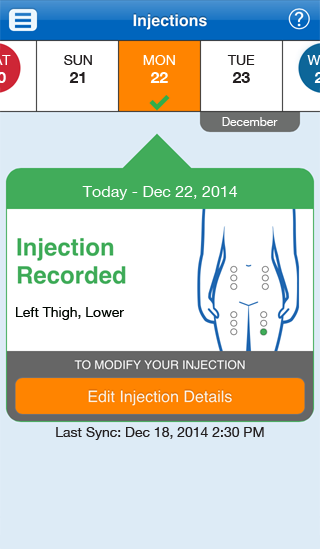
<style>
.page{position:relative;width:320px;height:549px;background:#ddebf6}
.page>*{position:absolute;margin:0}
.t1{font:14px/18px "HelveticaNeue";color:#231f20}
.t2{font:16px/18px "HelveticaNeue-Bold";color:#231f20}
.t3{font:14px/18px "HelveticaNeue";color:#ffffff}
.t4{font:16px/18px "HelveticaNeue-Bold";color:#ffffff}
.t5{font:12px "HelveticaNeue";color:#ffffff}
.t6{font:16px "HelveticaNeue";color:#ffffff}
.t7{font:14px "HelveticaNeue";color:#000600}
.t8{font:14px "HelveticaNeue";color:#231f20}
</style>
<div class="page">
<p class="t1" style="left:64px;top:55px;width:28px;height:28px;text-align:center">SUN<br><span class="t2">21</span></p>
<p class="t3" style="left:143px;top:55px;width:32px;height:28px;text-align:center">MON<br><span class="t4">22</span></p>
<p class="t1" style="left:227px;top:55px;width:28px;height:28px;text-align:center">TUE<br><span class="t2">23</span></p>
<p class="t5" style="left:222px;top:117px;width:56px;height:9px">December</p>
<p class="t6" style="left:82px;top:186px;width:156px;height:14px">Today - Dec 22, 2014</p>
<p class="t7" style="left:16px;top:307px;width:108px;height:13px">Left Thigh, Lower</p>
<p class="t8" style="left:56px;top:427px;width:208px;height:13px">Last Sync: Dec 18, 2014 2:30 PM</p>
</div>
